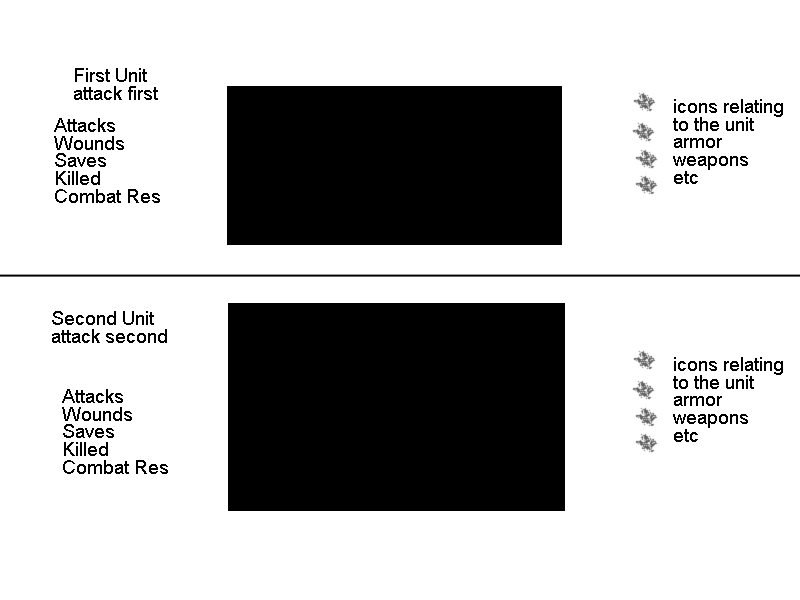
<style>
.page{position:relative;width:800px;height:600px;background:#ffffff}
.page>*{position:absolute;margin:0}
.t1{font:19.3px/17.7px "ArialMT";color:#000000}
</style>
<div class="page">
<p class="t1" style="left:74px;top:68px;width:84px;height:32px">First Unit<br>attack first</p>
<p class="t1" style="left:673px;top:99px;width:110px;height:85px">icons relating<br>to the unit<br>armor<br>weapons<br>etc</p>
<p class="t1" style="left:54px;top:118px;width:106px;height:85px">Attacks<br>Wounds<br>Saves<br>Killed<br>Combat Res</p>
<p class="t1" style="left:52px;top:311px;width:115px;height:32px">Second Unit<br>attack second</p>
<p class="t1" style="left:673px;top:357px;width:110px;height:85px">icons relating<br>to the unit<br>armor<br>weapons<br>etc</p>
<p class="t1" style="left:62px;top:389px;width:106px;height:85px">Attacks<br>Wounds<br>Saves<br>Killed<br>Combat Res</p>
</div>
